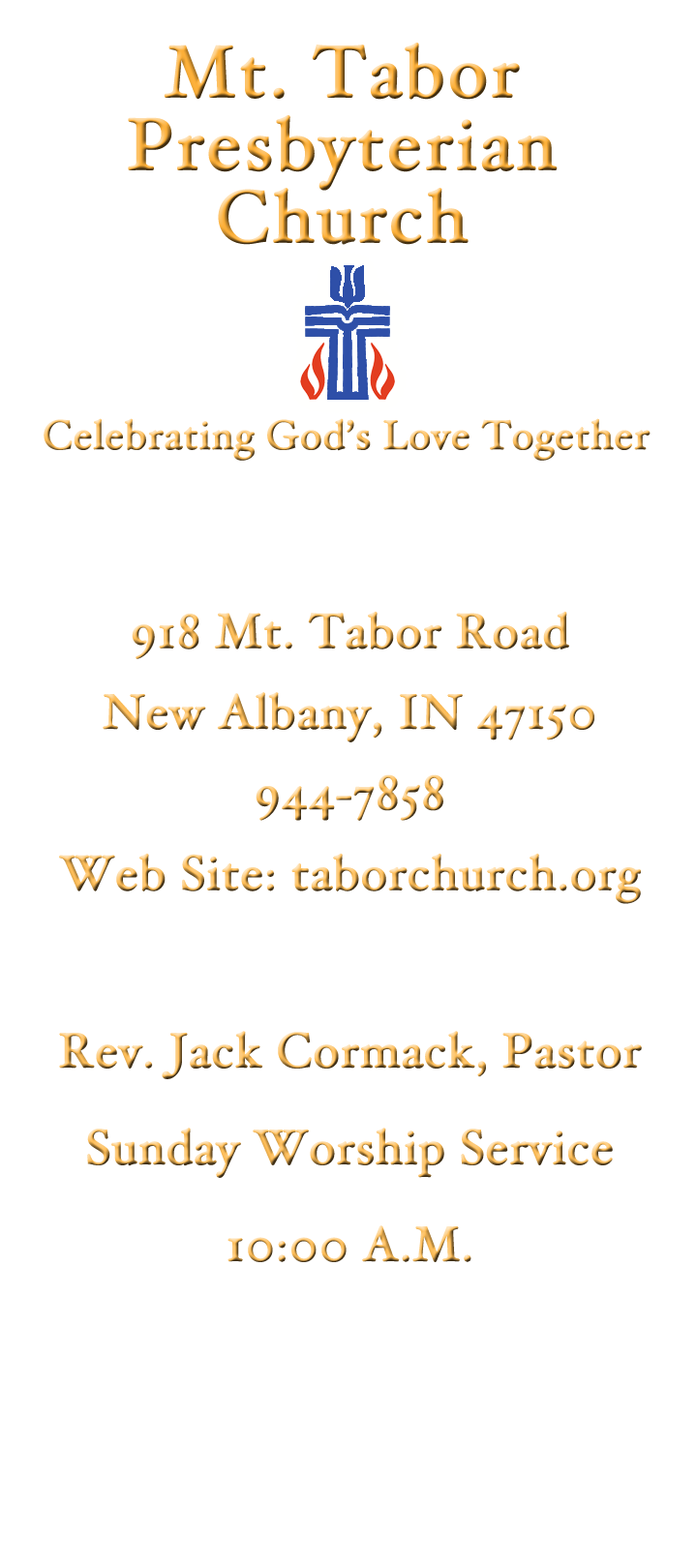
<style>
.page{position:relative;width:697px;height:1568px;background:#ffffff}
.page>*{position:absolute;margin:0}
.t1{font:72.6px/72.6px "HoeflerText-Regular";letter-spacing:0.025em;font-weight:bold}
.t2{font:40.3px "HoeflerText-Regular";font-weight:bold}
.t3{font:48.4px/80.7px "HoeflerText-Regular";font-weight:bold}
.t4{font:48.4px/96.8px "HoeflerText-Regular";font-weight:bold}
</style>
<div class="page">
<p class="t1" style="left:128px;top:43px;width:430px;height:202px;text-align:center">Mt. Tabor<br>Presbyterian<br>Church</p>
<p class="t2" style="left:44px;top:418px;width:606px;height:43px">Celebrating God’s Love Together</p>
<p class="t3" style="left:59px;top:611px;width:583px;height:651px;text-align:center">918 Mt. Tabor Road<br>New Albany, IN 47150<br>944-7858<br>Web Site: taborchurch.org<br><br><span class="t4">Rev. Jack Cormack, Pastor<br>Sunday Worship Service<br>10:00 A.M.</span></p>
</div>
